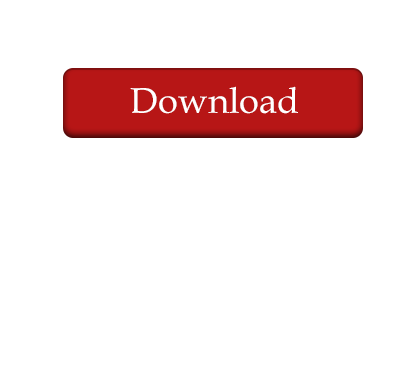
<style>
.page{position:relative;width:400px;height:376px;background:#ffffff}
.page>*{position:absolute;margin:0}
.t1{font:36px "BookAntiqua"}
.t2{font:36px "BookAntiqua";color:#ffffff}
</style>
<div class="page">
<p class="t1" style="left:129px;top:87px;width:168px;height:28px">Download</p>
<p class="t2" style="left:130px;top:86px;width:168px;height:28px">Download</p>
<p class="t2" style="left:130px;top:86px;width:168px;height:28px">Download</p>
</div>
